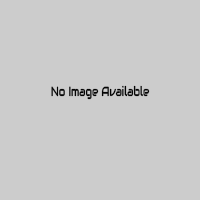
<style>
.page{position:relative;width:200px;height:200px;background:#cccccc}
.page>*{position:absolute;margin:0}
.t1{font:13.3px "Audiowide-Regular";color:#040404;scale:0.71 1}
</style>
<div class="page">
<p class="t1" style="left:51px;top:85px;width:99px;height:15px">No Image Available</p>
</div>
